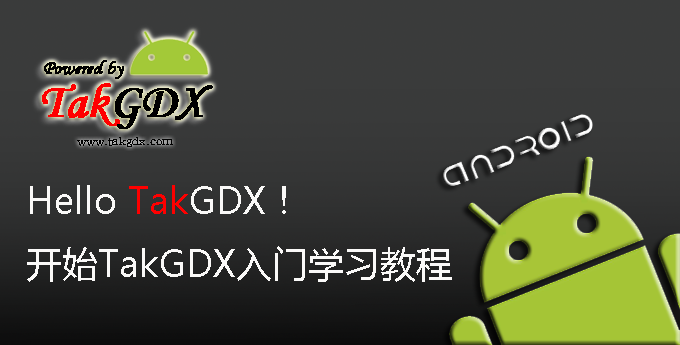
<style>
.page{position:relative;width:680px;height:345px;background:#3a3b3b}
.page>*{position:absolute;margin:0}
.t1{font:36px "MicrosoftYaHei";color:#faf9f8}
.t2{font:36px "MicrosoftYaHei";color:#fe0000}
</style>
<div class="page">
<p class="t1" style="left:27px;top:185px;width:425px;height:97px">Hello <span class="t2">Tak</span>GDX！<br>开始TakGDX入门学习教程</p>
</div>
